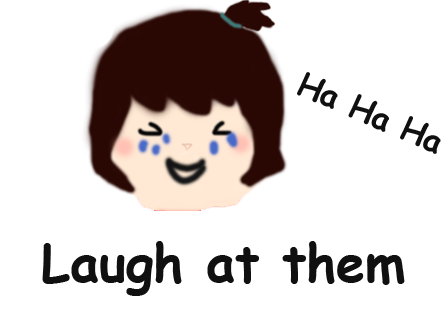
<style>
.page{position:relative;width:446px;height:313px;background:#ffffff}
.page>*{position:absolute;margin:0}
.t1{font:32px "ComicSansMS-Bold";color:#101010}
.t2{font:52px "ComicSansMS-Bold";color:#101010}
</style>
<div class="page">
<p class="t1" style="left:297px;top:72px;width:144px;height:82px;rotate:23deg">Ha Ha Ha</p>
<p class="t2" style="left:42px;top:241px;width:363px;height:55px">Laugh at them</p>
</div>
